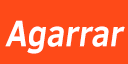
<style>
.page{position:relative;width:128px;height:64px;background:#fe4a18}
.page>*{position:absolute;margin:0}
.t1{font:37.8px "FogSansIt";color:#ffffff;scale:0.87 1}
</style>
<div class="page">
<p class="t1" style="left:5px;top:20px;width:120px;height:34px">Agarrar</p>
</div>
